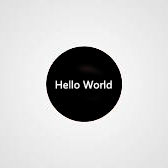
<style>
.page{position:relative;width:168px;height:168px}
.page>*{position:absolute;margin:0}
.t1{font:10px "MicrosoftYaHei";color:#ffffff}
</style>
<div class="page">
<p class="t1" style="left:55px;top:80px;width:57px;height:9px">Hello World</p>
</div>
